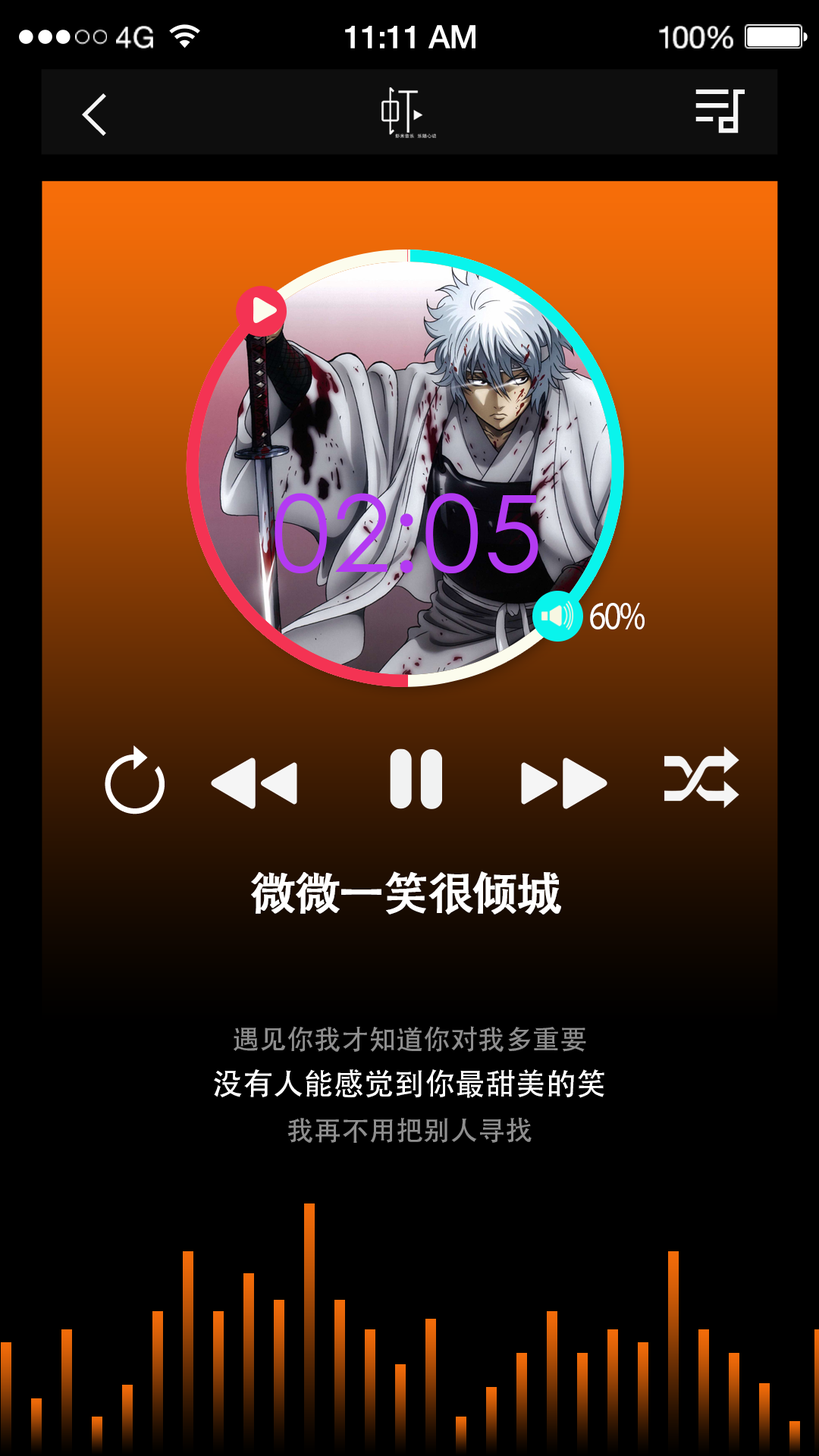
<style>
.page{position:relative;width:819px;height:1456px;background:#000000}
.page>*{position:absolute;margin:0}
.t1{font:29.4px "HelveticaNeue";letter-spacing:0.02em;color:#ffffff}
.t2{font:32px "HelveticaNeue-Medium";letter-spacing:-0.02em;color:#ffffff}
.t3{font:30.7px "HelveticaNeue";letter-spacing:-0.02em;color:#ffffff}
.t4{font:105.9px "STHeitiSC-Light";letter-spacing:0.02em;color:#b33af2}
.t5{font:40px "MyriadPro-Regular";letter-spacing:-0.05em;color:#ffffff;text-transform:uppercase;scale:0.82 1}
.t6{font:45.5px "AdobeHeitiStd-Regular";letter-spacing:-0.05em;color:#ffffff;text-transform:uppercase;font-weight:bold}
.t7{font:27.3px/45.5px "AdobeHeitiStd-Regular";color:#8e8e8e}
.t8{font:30.3px/45.5px "AdobeHeitiStd-Regular";color:#ffffff}
</style>
<div class="page">
<p class="t1" style="left:116px;top:26px;width:37px;height:23px">4G</p>
<p class="t2" style="left:345px;top:25px;width:130px;height:24px">11:11 AM</p>
<p class="t3" style="left:659px;top:26px;width:74px;height:23px">100%</p>
<p class="t4" style="left:275px;top:493px;width:263px;height:80px">02:05</p>
<p class="t5" style="left:590px;top:603px;width:55px;height:26px">60%</p>
<p class="t6" style="left:251px;top:871px;width:310px;height:44px">微微一笑很倾城</p>
<p class="t7" style="left:214px;top:1026px;width:390px;height:117px;text-align:center">遇见你我才知道你对我多重要<br><span class="t8">没有人能感觉到你最甜美的笑<br></span>我再不用把别人寻找</p>
</div>
